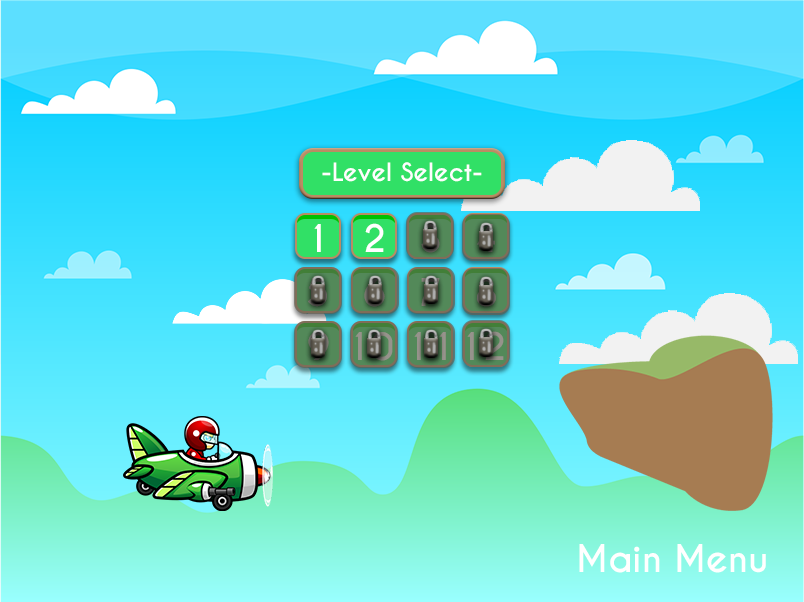
<style>
.page{position:relative;width:804px;height:602px}
.page>*{position:absolute;margin:0}
.t1{font:23.8px "CaviarDreams-Bold";color:#fefefe}
.t2{font:35.6px "CaviarDreams-Bold";color:#ffffff}
.t3{font:35.6px "CaviarDreams-Bold"}
.t4{font:35.6px "CaviarDreams-Bold";color:#94928a}
</style>
<div class="page">
<p class="t1" style="left:322px;top:162px;width:160px;height:20px">-Level Select-</p>
<p class="t2" style="left:314px;top:224px;width:7px;height:28px">1</p>
<p class="t2" style="left:365px;top:223px;width:19px;height:29px">2</p>
<p class="t3" style="left:477px;top:224px;width:18px;height:28px">4</p>
<p class="t3" style="left:364px;top:278px;width:21px;height:29px">6</p>
<p class="t3" style="left:355px;top:332px;width:38px;height:29px">10</p>
<p class="t4" style="left:414px;top:332px;width:32px;height:28px">11</p>
<p class="t3" style="left:467px;top:331px;width:37px;height:29px">12</p>
<p class="t2" style="left:579px;top:544px;width:187px;height:29px">Main Menu</p>
</div>
